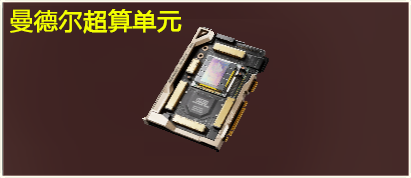
<style>
.page{position:relative;width:411px;height:178px}
.page>*{position:absolute;margin:0}
.t1{font:24px "MicrosoftYaHeiUI";color:#f4ff00;font-weight:bold}
</style>
<div class="page">
<p class="t1" style="left:10px;top:9px;width:172px;height:25px">曼德尔超算单元</p>
</div>
